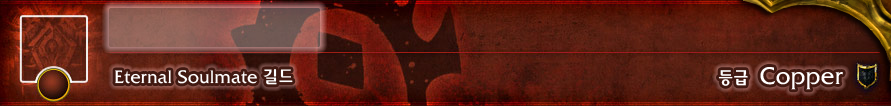
<style>
.page{position:relative;width:891px;height:106px}
.page>*{position:absolute;margin:0}
.t1{font:18px "2002L";color:#ffffff}
.t2{font:24px "2002L";color:#ffffff}
</style>
<div class="page">
<p class="t1" style="left:115px;top:69px;width:178px;height:16px">Eternal Soulmate 길드</p>
<p class="t2" style="left:718px;top:67px;width:125px;height:23px"><span class="t1">등급  </span>Copper</p>
</div>
